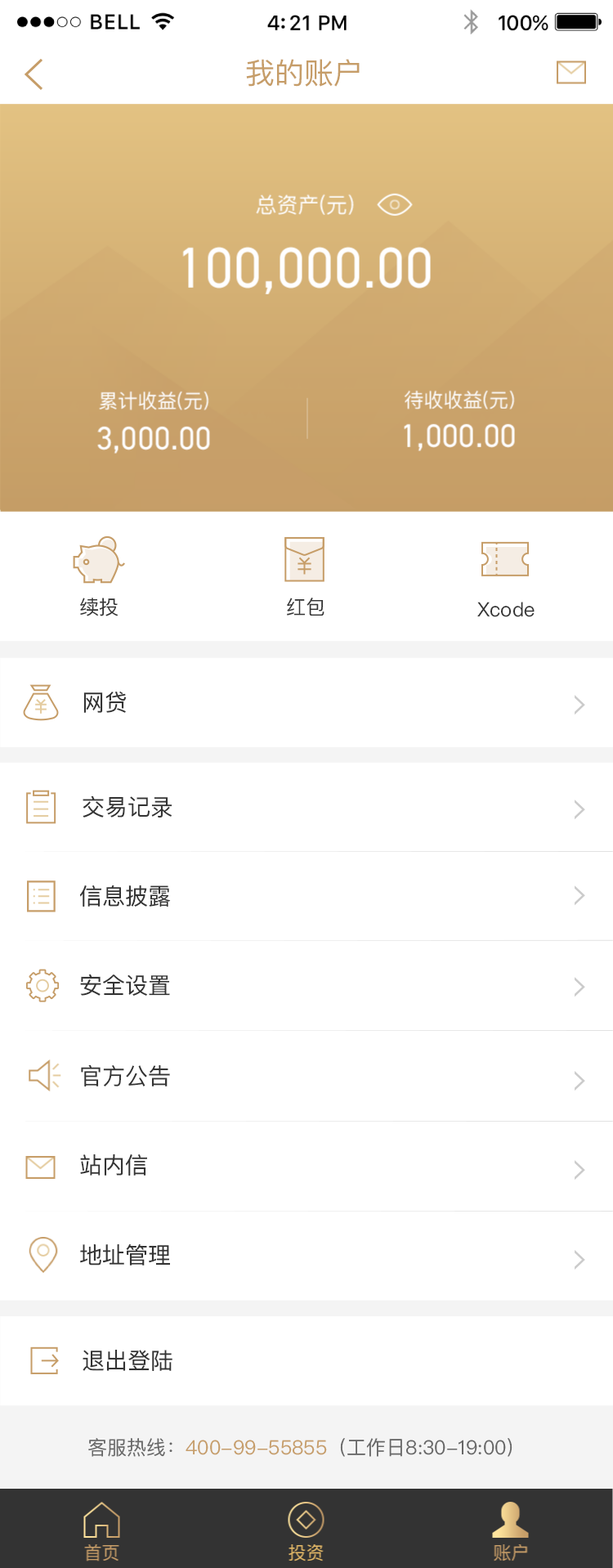
<style>
.page{position:relative;width:613px;height:1568px;background:#ffffff}
.page>*{position:absolute;margin:0}
.t1{font:29.4px "PingFangSC-Regular";color:#c69d68}
.t2{font:19.6px "PingFangSC-Regular";color:#333333}
.t3{font:22.9px "PingFangSC-Regular";color:#333333}
.t4{font:19.6px "PingFangSC-Regular";color:#666666}
.t5{font:19.6px "PingFangSC-Regular";color:#c69d69}
</style>
<div class="page">
<p class="t1" style="left:246px;top:59px;width:114px;height:28px">我的账户</p>
<p class="t2" style="left:80px;top:598px;width:39px;height:18px">续投</p>
<p class="t2" style="left:287px;top:598px;width:38px;height:18px">红包</p>
<p class="t2" style="left:477px;top:602px;width:58px;height:15px">Xcode</p>
<p class="t3" style="left:83px;top:691px;width:44px;height:22px">网贷</p>
<p class="t3" style="left:83px;top:795px;width:89px;height:23px">交易记录</p>
<p class="t3" style="left:79px;top:885px;width:92px;height:22px">信息披露</p>
<p class="t3" style="left:80px;top:974px;width:90px;height:22px">安全设置</p>
<p class="t3" style="left:81px;top:1064px;width:89px;height:22px">官方公告</p>
<p class="t3" style="left:80px;top:1154px;width:67px;height:22px">站内信</p>
<p class="t3" style="left:80px;top:1244px;width:90px;height:22px">地址管理</p>
<p class="t3" style="left:83px;top:1350px;width:89px;height:21px">退出登陆</p>
<p class="t4" style="left:88px;top:1438px;width:425px;height:19px">客服热线：<span class="t5">400-99-55855</span>（工作日8:30-19:00）</p>
</div>
